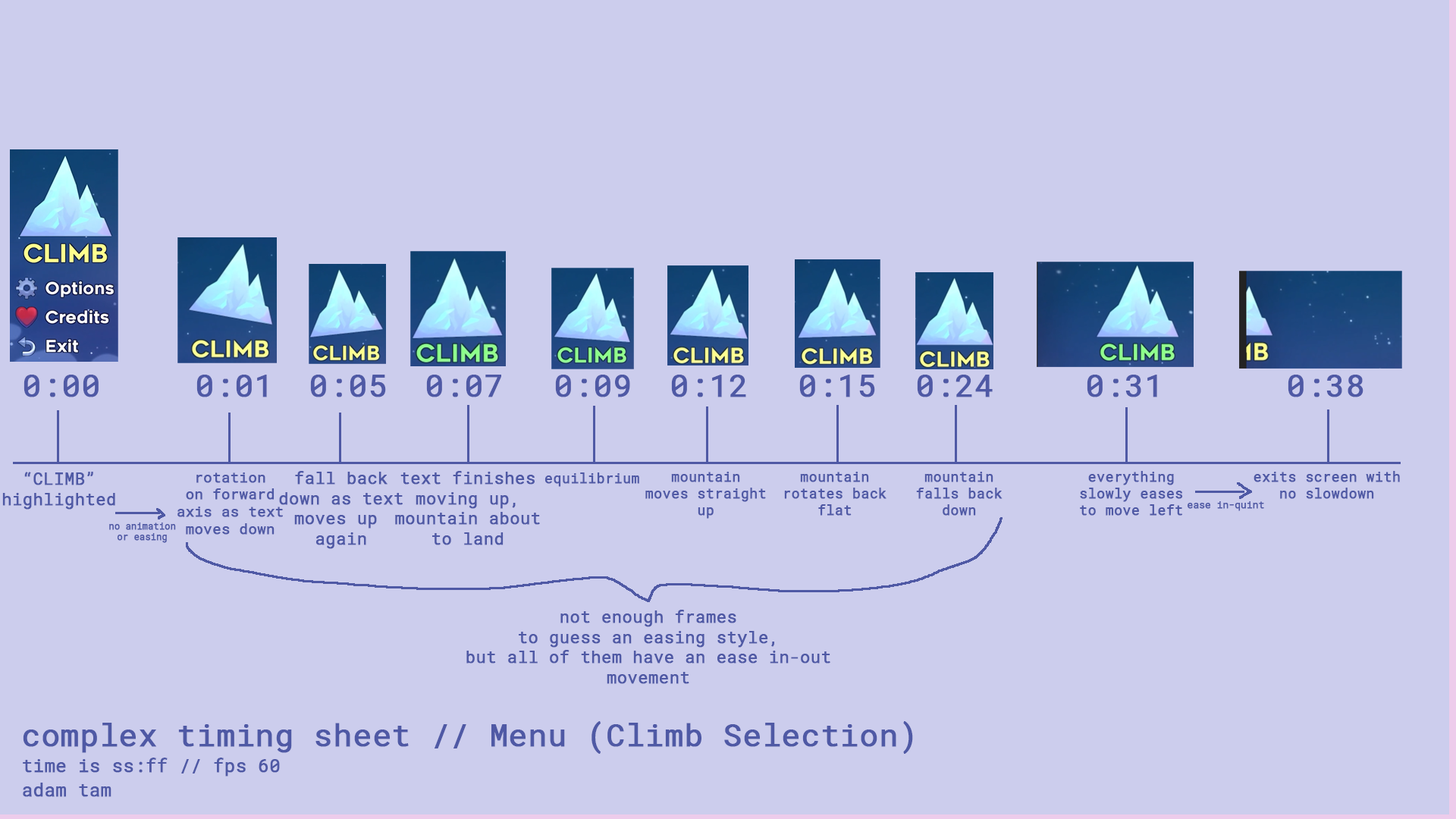
<style>
.page{position:relative;width:1456px;height:819px;background:#cccded}
.page>*{position:absolute;margin:0}
.t1{font:31.1px "RobotoMono-Regular";color:#4f59a5;font-weight:bold}
.t2{font:16.7px "RobotoMono-Regular";color:#4f59a5;font-weight:bold}
.t3{font:14.3px "RobotoMono-Regular";color:#4f59a5;font-weight:bold}
.t4{font:13.9px "RobotoMono-Regular";color:#4f59a5;font-weight:bold}
.t5{font:9.5px "RobotoMono-Regular";color:#4f59a5;font-weight:bold}
.t6{font:8.9px "RobotoMono-Regular";color:#4f59a5;font-weight:bold}
.t7{font:31.1px "RobotoMono-Regular";font-weight:bold}
.t8{font:17.9px "RobotoMono-Regular";color:#4f59a5;font-weight:bold}
</style>
<div class="page">
<p class="t1" style="left:24px;top:375px;width:75px;height:22px">0:00</p>
<p class="t1" style="left:196px;top:375px;width:71px;height:22px">0:01</p>
<p class="t1" style="left:310px;top:375px;width:76px;height:22px">0:05</p>
<p class="t1" style="left:426px;top:375px;width:75px;height:22px">0:07</p>
<p class="t1" style="left:555px;top:375px;width:75px;height:22px">0:09</p>
<p class="t1" style="left:671px;top:375px;width:75px;height:22px">0:12</p>
<p class="t1" style="left:799px;top:375px;width:76px;height:22px">0:15</p>
<p class="t1" style="left:917px;top:375px;width:76px;height:22px">0:24</p>
<p class="t1" style="left:1087px;top:375px;width:70px;height:22px">0:31</p>
<p class="t1" style="left:1288px;top:375px;width:75px;height:22px">0:38</p>
<p class="t2" style="left:2px;top:472px;width:113px;height:38px;text-align:center">“CLIMB”<br>highlighted</p>
<p class="t3" style="left:177px;top:472px;width:106px;height:63px;text-align:center">rotation<br>on forward<br>axis as text<br>moves down</p>
<p class="t2" style="left:279px;top:471px;width:124px;height:78px;text-align:center">fall back<br>down as text<br>moves up <br>again</p>
<p class="t2" style="left:395px;top:471px;width:145px;height:74px;text-align:center">text finishes<br>moving up,<br>mountain about<br>to land</p>
<p class="t4" style="left:544px;top:472px;width:95px;height:15px">equilibrium</p>
<p class="t4" style="left:645px;top:472px;width:121px;height:47px;text-align:center">mountain<br>moves straight<br>up</p>
<p class="t4" style="left:784px;top:472px;width:102px;height:44px;text-align:center">mountain<br>rotates back<br>flat</p>
<p class="t4" style="left:916px;top:472px;width:87px;height:44px;text-align:center">mountain<br>falls back<br>down</p>
<p class="t4" style="left:1080px;top:471px;width:103px;height:45px;text-align:center">everything<br>slowly eases<br>to move left</p>
<p class="t4" style="left:1254px;top:471px;width:146px;height:28px;text-align:center">exits screen with<br>no slowdown</p>
<p class="t5" style="left:1188px;top:501px;width:76px;height:10px">ease in-quint</p>
<p class="t6" style="left:109px;top:522px;width:67px;height:21px;text-align:center">no animation<br>or easing</p>
<p class="t2" style="left:466px;top:610px;width:364px;height:74px;text-align:center">not enough frames<br>to guess an easing style,<br>but all of them have an ease in-out<br>movement</p>
<p class="t7" style="left:23px;top:723px;width:716px;height:30px">simple timing sheet // Save Selection</p>
<p class="t1" style="left:23px;top:721px;width:890px;height:33px">complex timing sheet // Menu (Climb Selection)</p>
<p class="t8" style="left:23px;top:758px;width:257px;height:19px">time is ss:ff // fps 60</p>
<p class="t8" style="left:23px;top:758px;width:257px;height:19px">time is ss:ff // fps 60</p>
<p class="t8" style="left:23px;top:783px;width:88px;height:14px">adam tam</p>
<p class="t8" style="left:23px;top:783px;width:88px;height:14px">adam tam</p>
</div>
